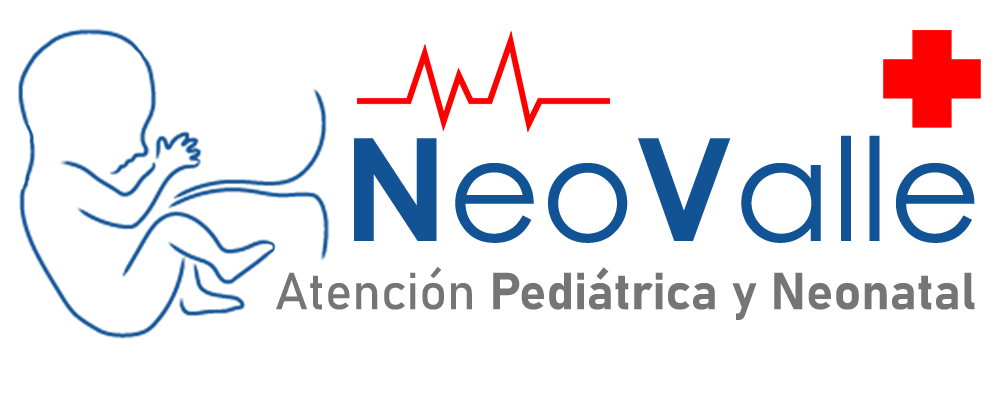
<style>
.page{position:relative;width:1000px;height:400px;background:#ffffff}
.page>*{position:absolute;margin:0}
.t1{font:142.7px "CenturyGothic";color:#115395}
.t2{font:142.7px "CenturyGothic-Bold";color:#115395}
.t3{font:51.1px "Bahnschrift-Bold";color:#757575}
.t4{font:51.1px "Bahnschrift";color:#757575}
</style>
<div class="page">
<p class="t1" style="left:354px;top:135px;width:621px;height:108px"><span class="t2">N</span>eo<span class="t2">V</span>alle</p>
<p class="t3" style="left:276px;top:266px;width:699px;height:54px"><span class="t4">Atención </span>Pediátrica y Neonatal</p>
</div>
